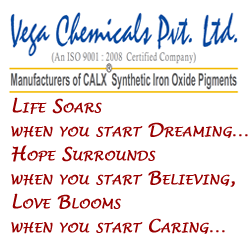
<style>
.page{position:relative;width:250px;height:250px;background:#ffffff}
.page>*{position:absolute;margin:0}
.t1{font:18px/24px "LucidaHandwriting-Italic";color:#990000;font-variant:small-caps;font-weight:bold}
</style>
<div class="page">
<p class="t1" style="left:11px;top:97px;width:237px;height:137px">Life Soars<br>when you start Dreaming…<br>Hope Surrounds<br>when you start Believing,<br>Love Blooms<br>when you start Caring…</p>
</div>
